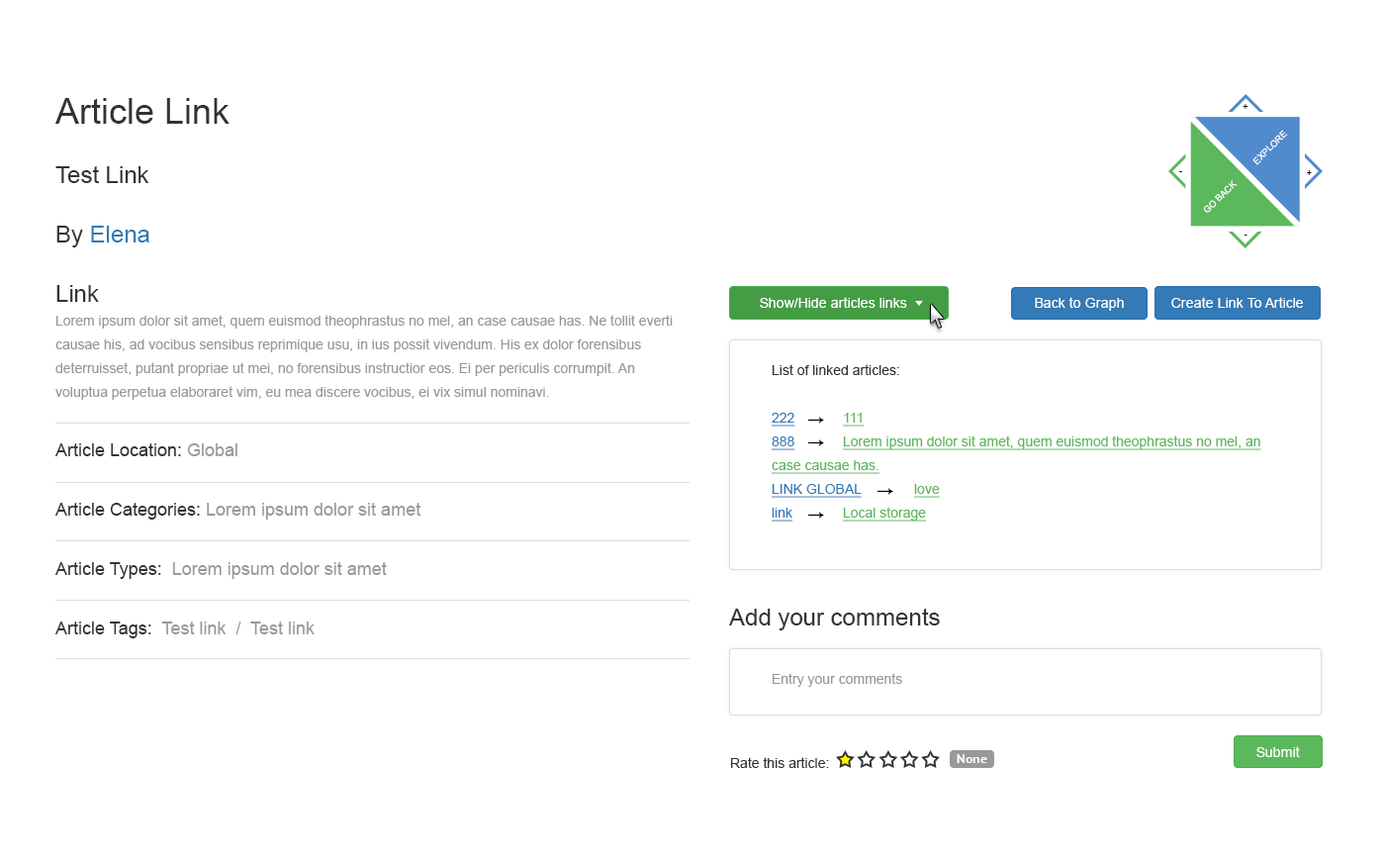
<style>
.page{position:relative;width:1383px;height:862px;background:#ffffff}
.page>*{position:absolute;margin:0}
.t1{font:13.9px/23.8px "ArialMT";color:#999999}
.t2{font:35.6px/59.4px "ArialMT";color:#333333}
.t3{font:23.8px/59.4px "ArialMT";color:#333333}
.t4{font:23.8px/59.4px "ArialMT";color:#337ab7}
.t5{font:17.8px/59.4px "ArialMT";color:#333333}
.t6{font:17.8px/59.4px "ArialMT";color:#999999}
.t7{font:9.2px "ArialMT";color:#000000;text-transform:uppercase}
.t8{font:9.2px "ArialMT";color:#ffffff;text-transform:uppercase}
.t9{font:13.9px "ArialMT";color:#ffffff}
.t10{font:13.9px/23.8px "ArialMT";color:#337ab7}
.t11{font:13.9px/23.8px "ArialMT";color:#333333}
.t12{font:13.9px/23.8px "ArialMT";color:#337ab7;text-decoration:underline}
.t13{font:13.9px/23.8px "ArialMT";color:#5cb85c;text-decoration:underline}
.t14{font:23.8px "ArialMT";color:#333333}
.t15{font:13.9px "ArialMT";color:#999999}
.t16{font:13.9px "ArialMT";color:#333333}
.t17{font:11.9px "PTSans-CaptionBold";color:#ffffff}
</style>
<div class="page">
<p class="t1" style="left:54px;top:98px;width:619px;height:540px"><span class="t2">Article Link <br></span><span class="t3">Test Link <br>By </span><span class="t4">Elena<br></span><span class="t3">Link <br></span>Lorem ipsum dolor sit amet, quem euismod theophrastus no mel, an case causae has. Ne tollit everti causae his, ad vocibus sensibus reprimique usu, in ius possit vivendum. His ex dolor forensibus deterruisset, putant propriae ut mei, no forensibus instructior eos. Ei per periculis corrumpit. An voluptua perpetua elaboraret vim, eu mea discere vocibus, ei vix simul nominavi.<br><span class="t5">Article Location: </span><span class="t6">Global <br></span><span class="t5">Article Categories:</span><span class="t6"> Lorem ipsum dolor sit amet<br></span><span class="t5">Article Types: </span><span class="t6"> Lorem ipsum dolor sit amet<br></span><span class="t5">Article Tags: </span><span class="t6"> Test link  /  Test link</span></p>
<p class="t7" style="left:1243px;top:104px;width:6px;height:5px">+</p>
<p class="t8" style="left:1253px;top:130px;width:35px;height:35px;rotate:-45deg">Explore</p>
<p class="t7" style="left:1180px;top:171px;width:3px;height:1px">-</p>
<p class="t7" style="left:1307px;top:170px;width:5px;height:5px">+</p>
<p class="t8" style="left:1204px;top:180px;width:34px;height:33px;rotate:-45deg">go back</p>
<p class="t7" style="left:1244px;top:235px;width:4px;height:1px">-</p>
<p class="t9" style="left:760px;top:297px;width:147px;height:11px">Show/Hide articles links</p>
<p class="t9" style="left:1035px;top:297px;width:89px;height:14px">Back to Graph</p>
<p class="t9" style="left:1172px;top:297px;width:131px;height:11px">Create Link To Article</p>
<p class="t10" style="left:772px;top:364px;width:490px;height:158px"><span class="t11">List of linked articles:<br></span><span class="t12"><br>222  </span><span class="t13">111 <br></span><span class="t12">888  </span><span class="t13">Lorem ipsum dolor sit amet, quem euismod theophrastus no mel, an case causae has.<br></span><span class="t12">LINK GLOBAL  </span><span class="t13">love<br></span><span class="t12">link  </span><span class="t13">Local storage<br></span><br>Read more at: http://worldwisepeople.azurewebsites.net/#!/article/q/56/a/e85a7400-2513-44bd-8375-c5cded37ba2a</p>
<p class="t14" style="left:729px;top:608px;width:211px;height:22px">Add your comments</p>
<p class="t15" style="left:773px;top:673px;width:130px;height:14px">Entry your comments</p>
<p class="t9" style="left:1257px;top:746px;width:43px;height:11px">Submit</p>
<p class="t16" style="left:731px;top:757px;width:98px;height:11px">Rate this article:</p>
<p class="t17" style="left:957px;top:754px;width:31px;height:9px">None</p>
</div>
